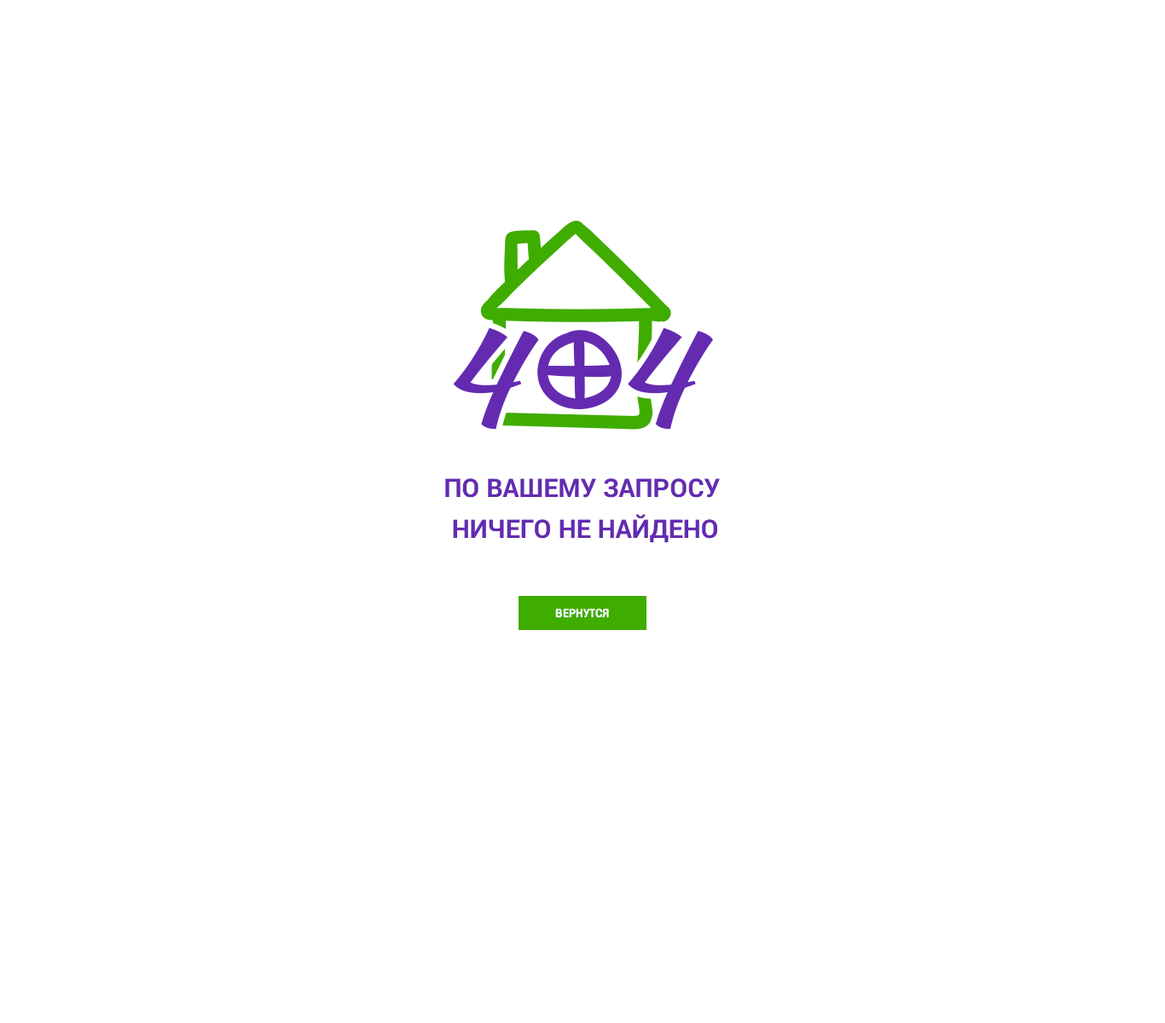
<style>
.page{position:relative;width:1165px;height:1023px;background:#ffffff}
.page>*{position:absolute;margin:0}
.t1{font:25.6px/40.9px "Roboto-Bold";color:#642bb1;text-transform:uppercase}
.t2{font:11.9px "Fregat-Bold";color:#ffffff;text-transform:uppercase}
</style>
<div class="page">
<p class="t1" style="left:445px;top:478px;width:275px;height:65px;text-align:center">по вашему запросу <br>ничего не найдено</p>
<p class="t2" style="left:555px;top:608px;width:54px;height:10px">вернутся</p>
</div>
